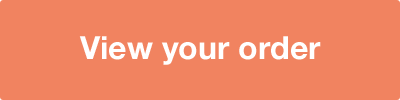
<style>
.page{position:relative;width:400px;height:100px;background:#f18360}
.page>*{position:absolute;margin:0}
.t1{font:32px "HelveticaNeue-Bold";color:#ffffff}
</style>
<div class="page">
<p class="t1" style="left:79px;top:36px;width:242px;height:29px">View your order</p>
</div>
